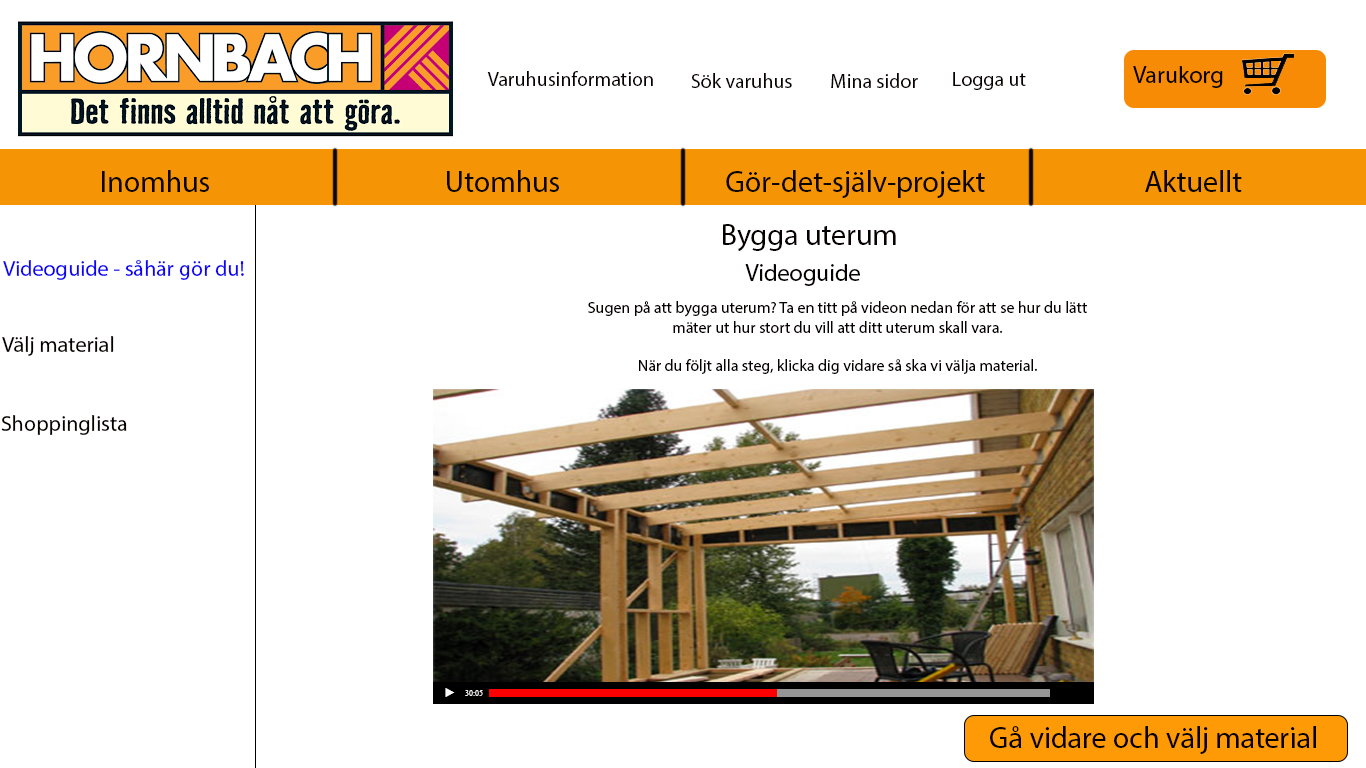
<style>
.page{position:relative;width:1366px;height:768px;background:#ffffff}
.page>*{position:absolute;margin:0}
.t1{font:20px "MyriadPro-Regular";color:#060000}
.t2{font:24px "MyriadPro-Regular";color:#060000}
.t3{font:30px "MyriadPro-Regular";color:#0b0700}
.t4{font:30px "MyriadPro-Regular";color:#060000}
.t5{font:22px "MyriadPro-Regular";color:#0f04f8}
.t6{font:16px "TimesNewRomanPSMT";color:#060000}
.t7{font:22px "MyriadPro-Regular";color:#060000}
.t8{font:12px "TimesNewRomanPSMT";color:#fbfbfb}
.t9{font:8px "TimesNewRomanPSMT";color:#faf9f9}
</style>
<div class="page">
<p class="t1" style="left:487px;top:71px;width:166px;height:15px">Varuhusinformation</p>
<p class="t1" style="left:691px;top:73px;width:101px;height:15px">Sök varuhus</p>
<p class="t1" style="left:831px;top:73px;width:87px;height:15px">Mina sidor</p>
<p class="t1" style="left:953px;top:72px;width:73px;height:18px">Logga ut</p>
<p class="t2" style="left:1133px;top:66px;width:90px;height:22px">Varukorg</p>
<p class="t3" style="left:102px;top:170px;width:107px;height:22px">Inomhus</p>
<p class="t3" style="left:447px;top:170px;width:112px;height:22px">Utomhus</p>
<p class="t3" style="left:726px;top:170px;width:259px;height:28px">Gör-det-själv-projekt</p>
<p class="t3" style="left:1145px;top:170px;width:97px;height:22px">Aktuellt</p>
<p class="t4" style="left:723px;top:224px;width:173px;height:28px">Bygga uterum</p>
<p class="t5" style="left:3px;top:260px;width:241px;height:20px">Videoguide - såhär gör du!</p>
<p class="t2" style="left:745px;top:264px;width:115px;height:22px">Videoguide</p>
<p class="t6" style="left:588px;top:301px;width:499px;height:73px;text-align:center">Sugen på att bygga uterum? Ta en titt på videon nedan för att se hur du lätt mäter ut hur stort du vill att ditt uterum skall vara. <br><br>När du följt alla steg, klicka dig vidare så ska vi välja material.</p>
<p class="t7" style="left:2px;top:336px;width:112px;height:20px">Välj material</p>
<p class="t7" style="left:1px;top:415px;width:126px;height:20px">Shoppinglista</p>
<p class="t8" style="left:445px;top:688px;width:10px;height:9px">►</p>
<p class="t9" style="left:465px;top:690px;width:18px;height:6px">30:05</p>
<p class="t4" style="left:990px;top:726px;width:326px;height:28px">Gå vidare och välj material</p>
</div>
